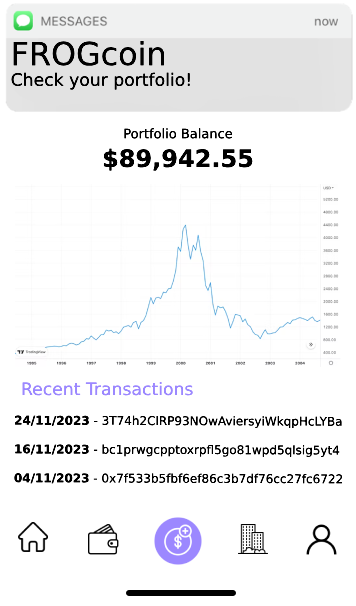
<style>
.page{position:relative;width:356px;height:606px;background:#ffffff}
.page>*{position:absolute;margin:0}
.t1{font:17.2px "DejaVuSans";color:#000000}
.t2{font:31.8px "DejaVuSans";color:#000000}
.t3{font:17.2px "DejaVuSans";color:#9c88ff}
.t4{font:13px "DejaVuSans";color:#000000}
.t5{font:24px "DejaVuSans-Bold";color:#000000}
.t6{font:12px "DejaVuSans";color:#000000}
.t7{font:12px "DejaVuSans-Bold";color:#000000}
</style>
<div class="page">
<p class="t1" style="left:11px;top:41px;width:179px;height:49px"><span class="t2">FROGcoin<br></span>Check your portfolio<span class="t3">!</span></p>
<p class="t4" style="left:103px;top:128px;width:150px;height:43px;text-align:center">Portfolio Balance<br><span class="t5">$89,942.55</span></p>
<p class="t3" style="left:22px;top:382px;width:171px;height:14px">Recent Transactions</p>
<p class="t6" style="left:14px;top:415px;width:328px;height:69px"><span class="t7">24/11/2023 </span>- 3T74h2ClRP93NOwAviersyiWkqpHcLYBa<br><br><span class="t7">16/11/2023</span> - bc1prwgcpptoxrpfl5go81wpd5qlsig5yt4<br><span class="t7"><br>04/11/2023</span> - 0x7f533b5fbf6ef86c3b7df76cc27fc6722</p>
</div>
